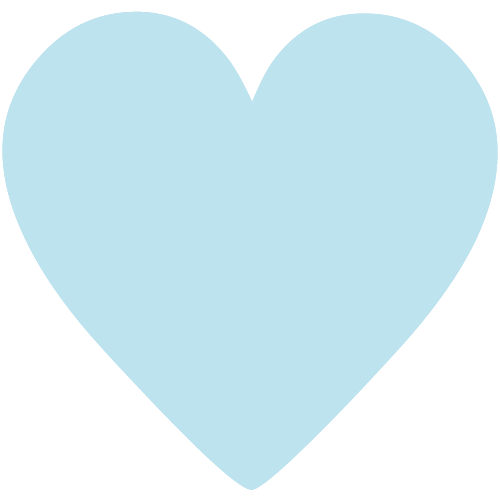
<style>
.page{position:relative;width:500px;height:500px;background:#bde3ef}
.page>*{position:absolute;margin:0}
.t1{font:568.1px "AppleMyungjo";color:#bde3ef;scale:1.14 1}
</style>
<div class="page">
<p class="t1" style="left:2px;top:11px;width:496px;height:479px">♥</p>
<p class="t1" style="left:2px;top:11px;width:496px;height:479px">♡</p>
</div>
